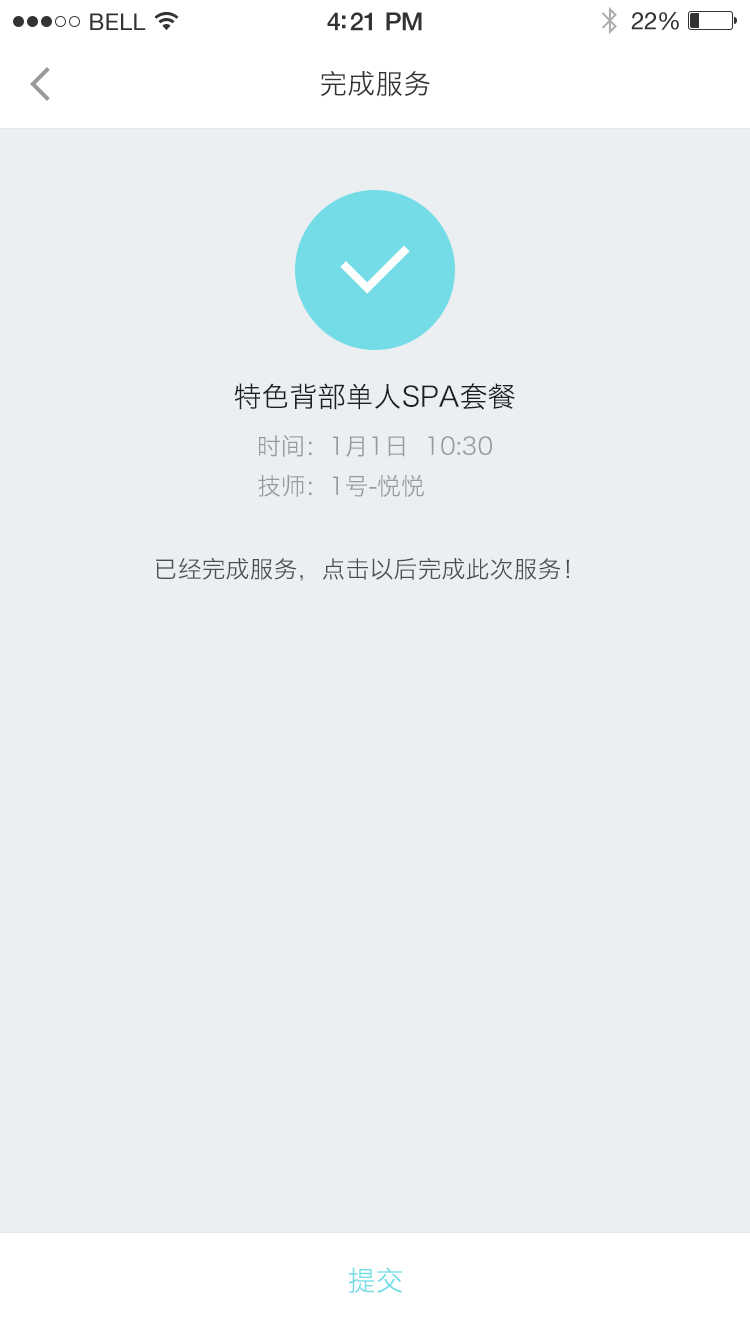
<style>
.page{position:relative;width:750px;height:1330px;background:#ebeff2}
.page>*{position:absolute;margin:0}
.t1{font:28px "HiraginoSansGB-W3";color:#333333}
.t2{font:28px "HiraginoSansGB-W3";color:#1d1d26}
.t3{font:24px/40px "HiraginoSansGB-W3";color:#999999}
.t4{font:24px "HiraginoSansGB-W3";color:#4d4d4d}
.t5{font:28px "HiraginoSansGB-W3";color:#73dce6}
</style>
<div class="page">
<p class="t1" style="left:320px;top:70px;width:110px;height:27px">完成服务</p>
<p class="t2" style="left:234px;top:383px;width:281px;height:27px">特色背部单人SPA套餐</p>
<p class="t3" style="left:258px;top:435px;width:234px;height:62px">时间：1月1日  10:30<br>技师：1号-悦悦</p>
<p class="t4" style="left:156px;top:557px;width:413px;height:24px">已经完成服务，点击以后完成此次服务！</p>
<p class="t5" style="left:348px;top:1267px;width:54px;height:26px">提交</p>
</div>
